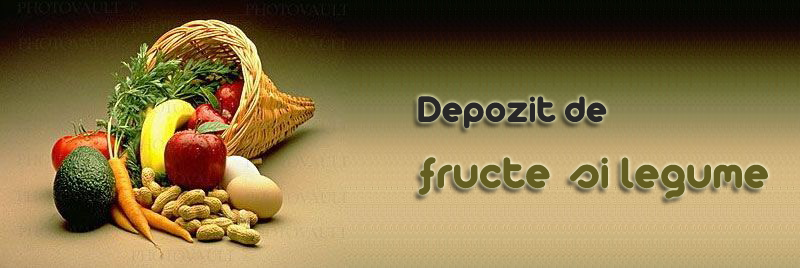
<style>
.page{position:relative;width:800px;height:268px}
.page>*{position:absolute;margin:0}
.t1{font:40px "Arista2.0Alternate";color:#282727}
.t2{font:48px "Arista2.0Alternate";color:#645e21}
</style>
<div class="page">
<p class="t1" style="left:418px;top:96px;width:189px;height:33px">Depozit de</p>
<p class="t2" style="left:418px;top:157px;width:350px;height:42px">fructe si legume</p>
</div>
